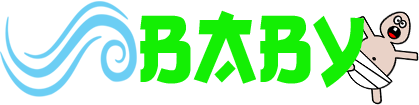
<style>
.page{position:relative;width:419px;height:105px;background:#ffffff}
.page>*{position:absolute;margin:0}
.t1{font:100px "GangofThree";color:#14ef04}
</style>
<div class="page">
<p class="t1" style="left:140px;top:10px;width:224px;height:78px">Baby</p>
</div>
